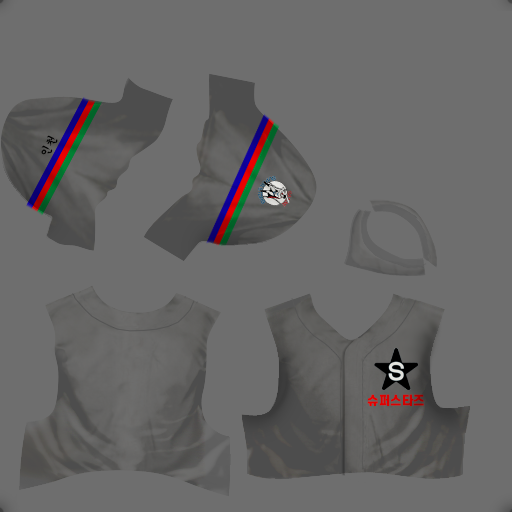
<style>
.page{position:relative;width:512px;height:512px;background:#6e6e6e}
.page>*{position:absolute;margin:0}
.t1{font:12px "H2gsrB";color:#000000}
.t2{font:12px "S-CoreDream-9Black";color:#db0000}
</style>
<div class="page">
<p class="t1" style="left:41px;top:135px;width:17px;height:20px;rotate:-64deg">인천</p>
<p class="t2" style="left:367px;top:394px;width:57px;height:12px">슈퍼스타즈</p>
</div>
